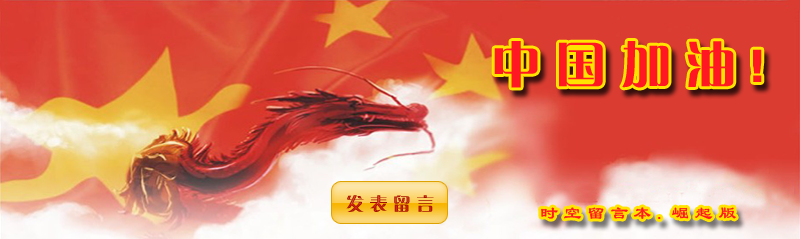
<style>
.page{position:relative;width:800px;height:239px}
.page>*{position:absolute;margin:0}
.t1{font:50px "FZCQK--GBK1-0";letter-spacing:0.3em;color:#ff1722}
.t2{font:18px "FZCQK--GBK1-0";letter-spacing:0.3em}
.t3{font:18px "LiSu";letter-spacing:0.3em;color:#ff1722}
</style>
<div class="page">
<p class="t1" style="left:494px;top:41px;width:268px;height:47px">中国加油!</p>
<p class="t2" style="left:346px;top:195px;width:88px;height:17px">发表留言</p>
<p class="t3" style="left:541px;top:207px;width:195px;height:13px">时空留言本.崛起版</p>
</div>
